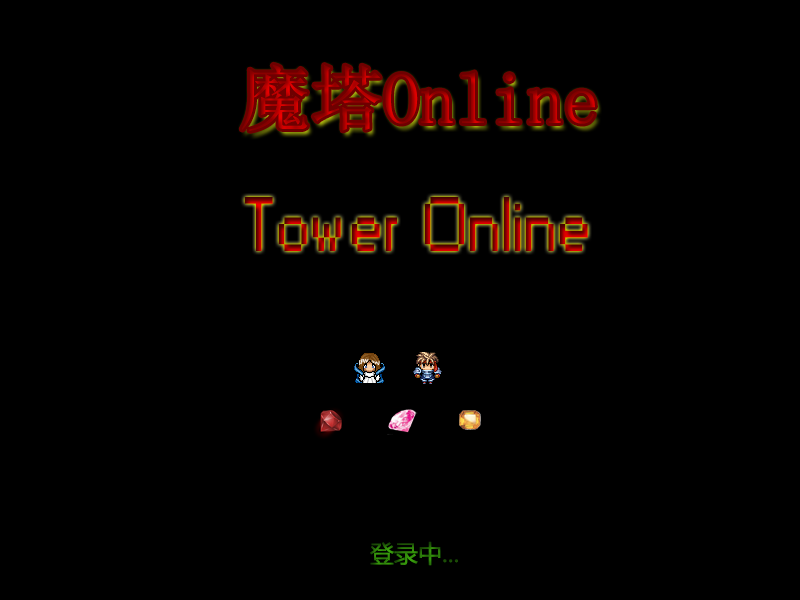
<style>
.page{position:relative;width:800px;height:600px;background:#000000}
.page>*{position:absolute;margin:0}
.t1{font:72px "SimSun"}
.t2{font:72px "Small Fonts"}
.t3{font:24px "MicrosoftYaHeiUI"}
</style>
<div class="page">
<p class="t1" style="left:241px;top:64px;width:354px;height:67px">魔塔Online</p>
<p class="t2" style="left:244px;top:197px;width:344px;height:54px">Tower  Online</p>
<p class="t3" style="left:370px;top:541px;width:88px;height:25px">登录中...</p>
</div>
